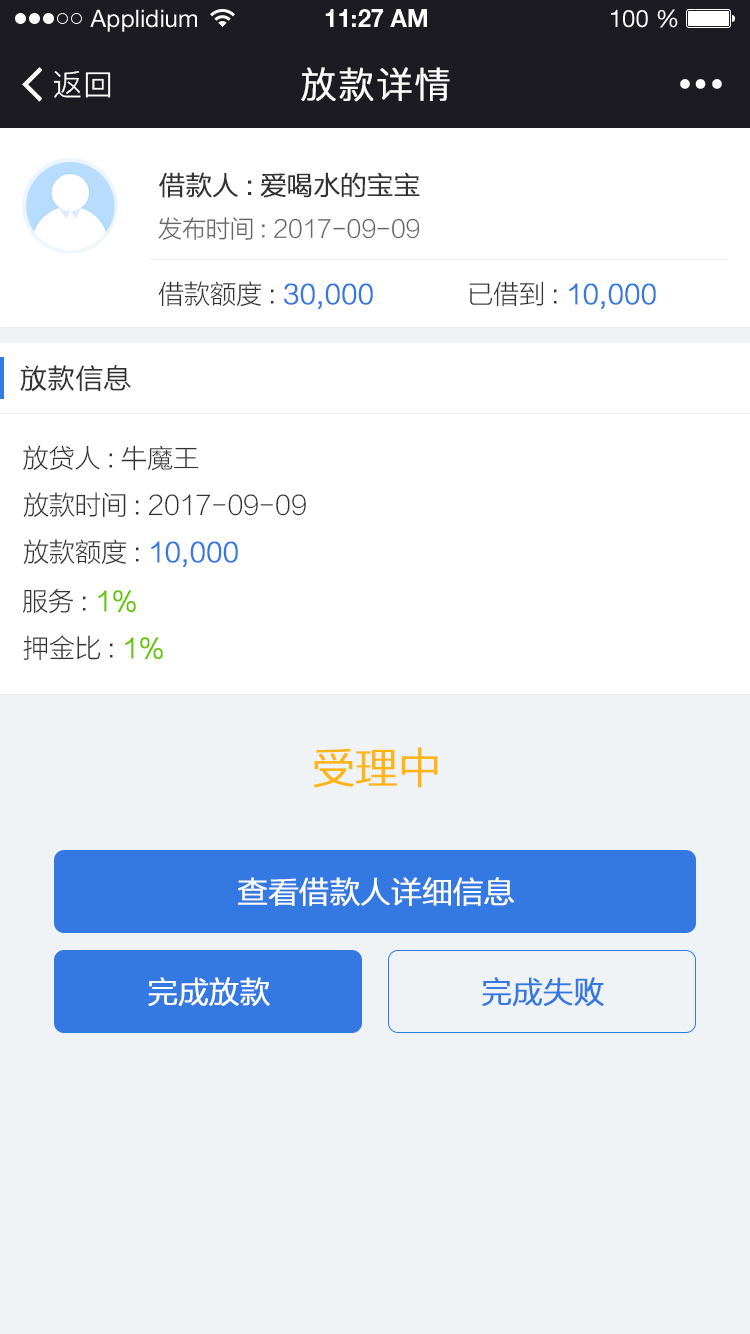
<style>
.page{position:relative;width:750px;height:1334px;background:#ffffff}
.page>*{position:absolute;margin:0}
.t1{font:24px "HelveticaNeueLTStd-Roman";color:#ffffff}
.t2{font:24px "HelveticaNeueLTStd-Bd";color:#ffffff}
.t3{font:30px "PingFang-SC-Regular";letter-spacing:0.025em;color:#ffffff}
.t4{font:36px "PingFang-SC-Regular";letter-spacing:0.025em;color:#ffffff;font-weight:bold}
.t5{font:26px "FZLTXHK--GBK1-0";color:#333333;font-weight:bold}
.t6{font:24px "FZLTXHK--GBK1-0";color:#666666}
.t7{font:26px "FZLTXHK--GBK1-0";color:#3479e1;font-weight:bold}
.t8{font:26px "FZLTXHK--GBK1-0";color:#333333}
.t9{font:28px "FZLTH_YS_GBK";color:#333333}
.t10{font:26px "FZLTXHK--GBK1-0";color:#64c600;font-weight:bold}
.t11{font:42px "FZLTXHK--GBK1-0";color:#ffb514;font-weight:bold}
.t12{font:30px "FZLTXHK--GBK1-0";color:#ffffff;font-weight:bold}
.t13{font:30px "FZLTXHK--GBK1-0";color:#3479e1;font-weight:bold}
</style>
<div class="page">
<p class="t1" style="left:90px;top:9px;width:107px;height:23px">Applidium</p>
<p class="t2" style="left:325px;top:9px;width:102px;height:18px">11:27 AM</p>
<p class="t1" style="left:611px;top:9px;width:67px;height:19px">100 %</p>
<p class="t3" style="left:53px;top:71px;width:58px;height:27px">返回</p>
<p class="t4" style="left:301px;top:67px;width:149px;height:35px">放款详情</p>
<p class="t5" style="left:159px;top:172px;width:261px;height:26px">借款人:爱喝水的宝宝</p>
<p class="t6" style="left:158px;top:217px;width:262px;height:23px">发布时间: 2017-09-09</p>
<p class="t7" style="left:158px;top:281px;width:215px;height:28px"><span class="t8">借款额度: </span>30,000</p>
<p class="t7" style="left:469px;top:281px;width:187px;height:28px"><span class="t8">已借到: </span>10,000</p>
<p class="t9" style="left:20px;top:365px;width:111px;height:27px">放款信息</p>
<p class="t8" style="left:23px;top:445px;width:176px;height:26px">放贷人:牛魔王</p>
<p class="t8" style="left:23px;top:492px;width:283px;height:25px">放款时间: 2017-09-09</p>
<p class="t7" style="left:23px;top:539px;width:215px;height:28px"><span class="t8">放款额度: </span>10,000</p>
<p class="t8" style="left:22px;top:588px;width:114px;height:26px">服务: <span class="t10">1%</span></p>
<p class="t8" style="left:23px;top:635px;width:140px;height:25px">押金比: <span class="t10">1%</span></p>
<p class="t11" style="left:313px;top:747px;width:125px;height:41px">受理中</p>
<p class="t12" style="left:238px;top:877px;width:276px;height:29px">查看借款人详细信息</p>
<p class="t12" style="left:148px;top:977px;width:122px;height:29px">完成放款</p>
<p class="t13" style="left:482px;top:977px;width:122px;height:29px">完成失败</p>
</div>
